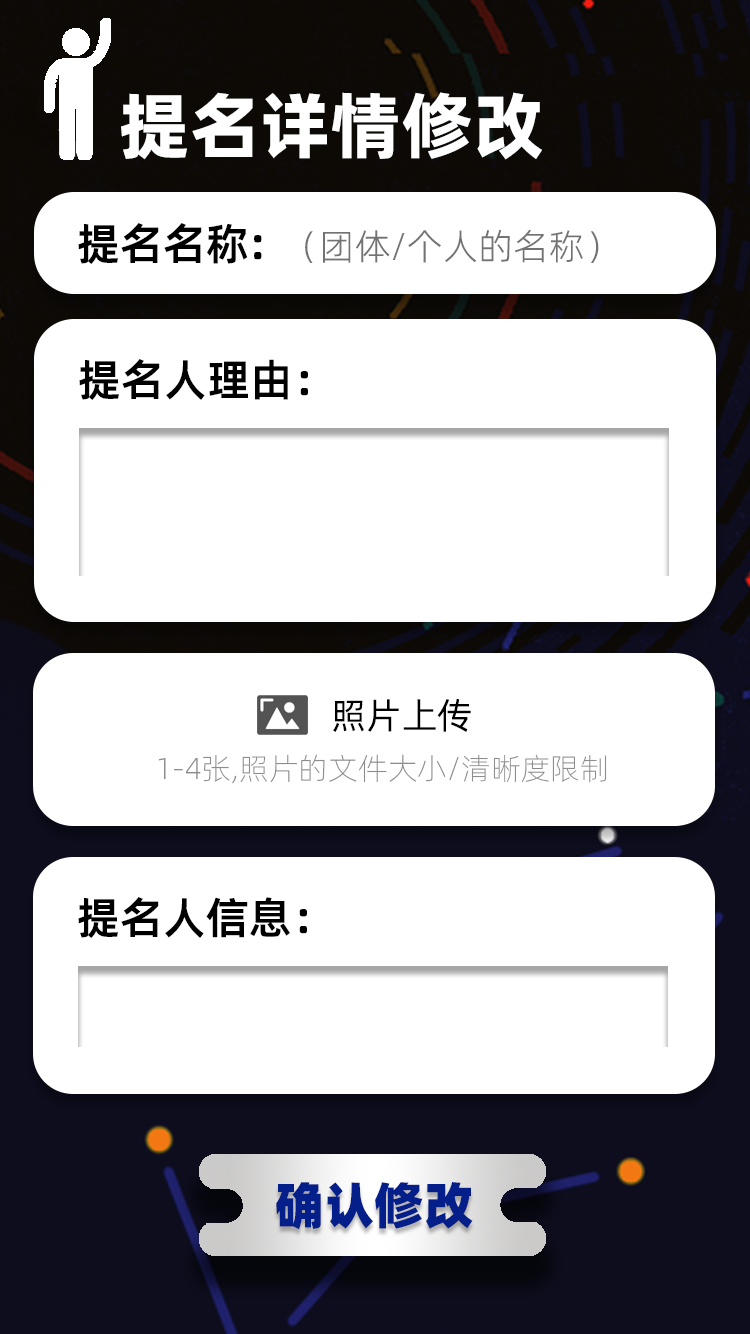
<style>
.page{position:relative;width:750px;height:1334px;background:#ffffff}
.page>*{position:absolute;margin:0}
.t1{font:72px "AlibabaPuHuiTi_2_105_Heavy";color:#ffffff}
.t2{font:43.9px "AlibabaPuHuiTi_2_85_Bold";color:#000000}
.t3{font:36px "AlibabaPuHuiTi_2_45_Light";color:#737373}
.t4{font:36px "AlibabaPuHuiTi_2_55_Regular";color:#000000}
.t5{font:30.2px "AlibabaPuHuiTi_2_35_Thin";color:#8d8d8d}
.t6{font:50px "AlibabaPuHuiTi_2_115_Black";color:#041f89}
</style>
<div class="page">
<p class="t1" style="left:121px;top:92px;width:421px;height:68px">提名详情修改</p>
<p class="t2" style="left:78px;top:223px;width:184px;height:41px">提名名称:</p>
<p class="t3" style="left:305px;top:229px;width:294px;height:34px">（团体/个人的名称）</p>
<p class="t2" style="left:79px;top:359px;width:229px;height:41px">提名人理由：</p>
<p class="t4" style="left:333px;top:699px;width:138px;height:34px">照片上传</p>
<p class="t5" style="left:158px;top:754px;width:449px;height:30px">1-4张,照片的文件大小/清晰度限制</p>
<p class="t2" style="left:78px;top:897px;width:229px;height:41px">提名人信息：</p>
<p class="t6" style="left:276px;top:1182px;width:197px;height:48px">确认修改</p>
</div>
